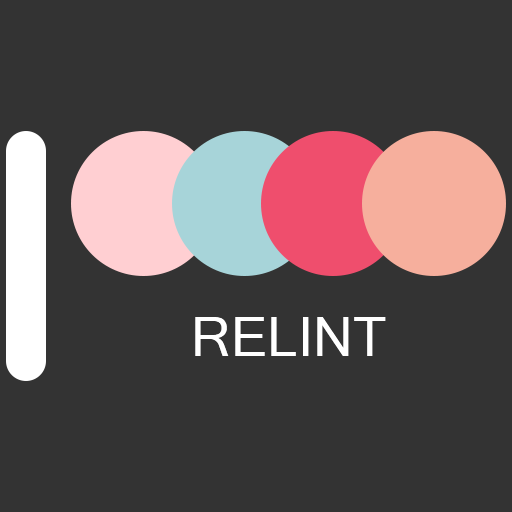
<style>
.page{position:relative;width:512px;height:512px;background:#333333}
.page>*{position:absolute;margin:0}
.t1{font:55px "MicrosoftSansSerif";color:#ffffff}
</style>
<div class="page">
<p class="t1" style="left:195px;top:317px;width:191px;height:39px">RELINT</p>
</div>
